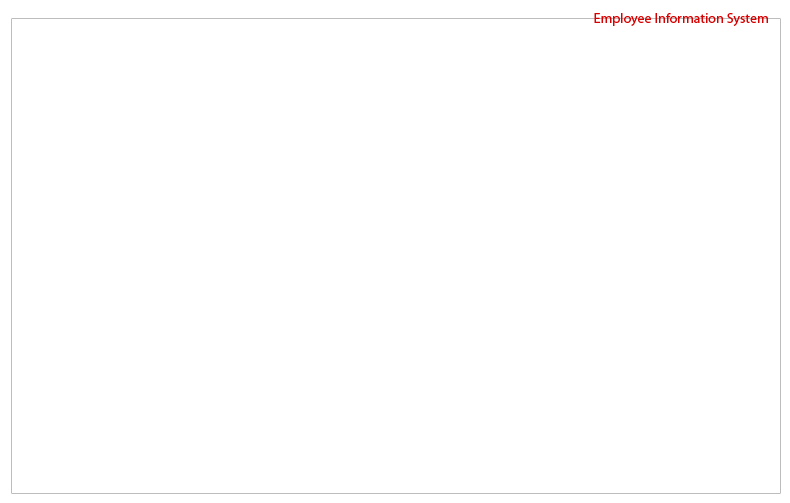
<style>
.page{position:relative;width:790px;height:503px;background:#ffffff}
.page>*{position:absolute;margin:0}
.t1{font:14px "MyriadPro-Regular";color:#d80000}
</style>
<div class="page">
<p class="t1" style="left:594px;top:13px;width:174px;height:13px">Employee Information System</p>
</div>
